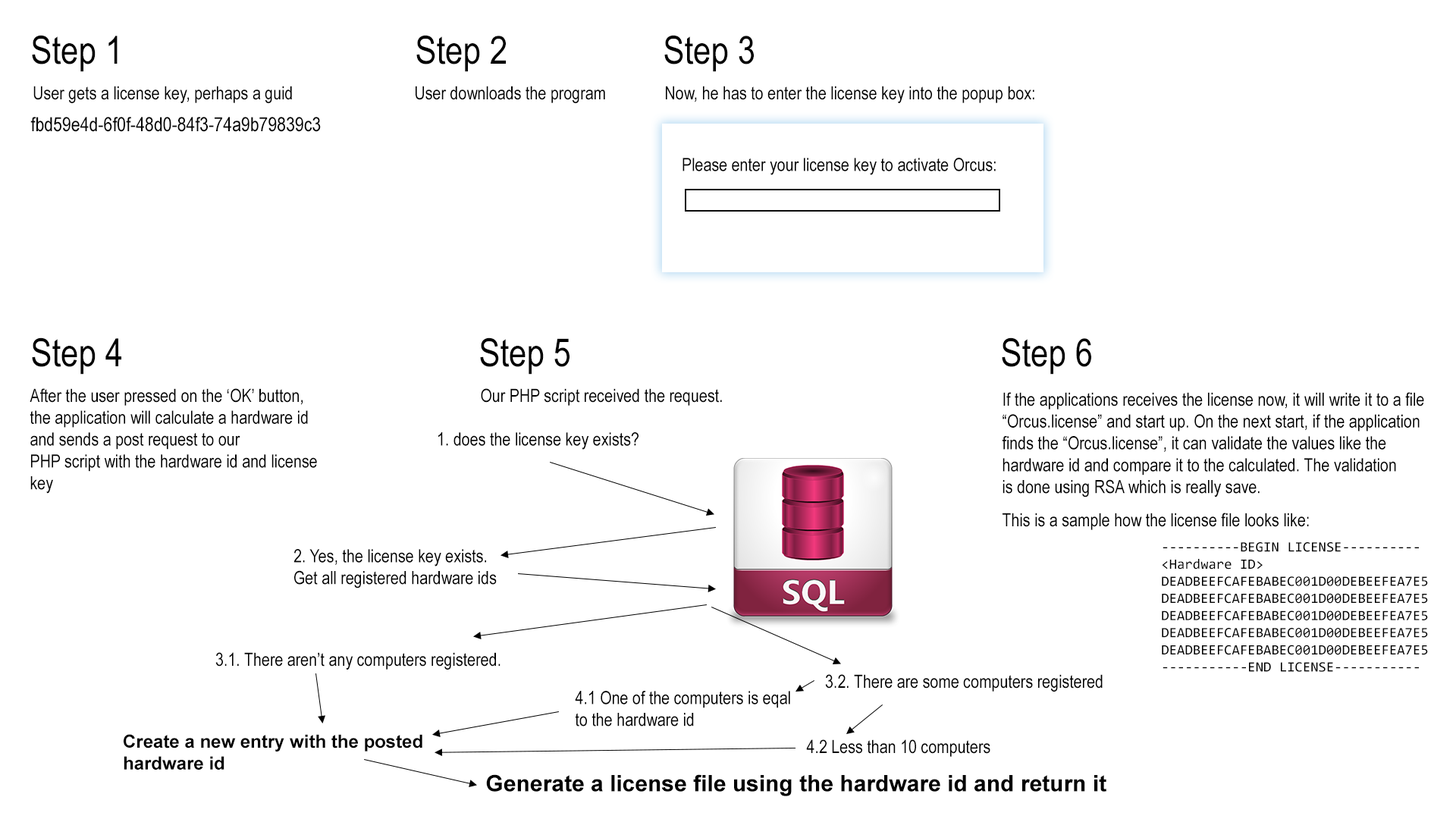
<style>
.page{position:relative;width:1456px;height:819px;background:#ffffff}
.page>*{position:absolute;margin:0}
.t1{font:38.9px "ArialNarrow";color:#000000}
.t2{font:18.2px "ArialNarrow";color:#000000}
.t3{font:19.7px "ArialNarrow";color:#000000}
.t4{font:14.3px "Consolas";color:#000000}
.t5{font:18.2px "Arial-BoldMT";color:#000000}
.t6{font:22.7px "Arial-BoldMT";color:#000000}
</style>
<div class="page">
<p class="t1" style="left:32px;top:35px;width:86px;height:37px">Step 1</p>
<p class="t1" style="left:416px;top:35px;width:90px;height:37px">Step 2</p>
<p class="t1" style="left:664px;top:35px;width:90px;height:37px">Step 3</p>
<p class="t2" style="left:33px;top:86px;width:259px;height:17px">User gets a license key, perhaps a guid</p>
<p class="t2" style="left:416px;top:86px;width:189px;height:17px">User downloads the program</p>
<p class="t2" style="left:666px;top:86px;width:368px;height:17px">Now, he has to enter the license key into the popup box:</p>
<p class="t3" style="left:30px;top:117px;width:291px;height:15px">fbd59e4d-6f0f-48d0-84f3-74a9b79839c3</p>
<p class="t2" style="left:682px;top:158px;width:314px;height:17px">Please enter your license key to activate Orcus:</p>
<p class="t1" style="left:32px;top:337px;width:89px;height:38px">Step 4</p>
<p class="t1" style="left:480px;top:337px;width:90px;height:38px">Step 5</p>
<p class="t1" style="left:1002px;top:337px;width:89px;height:38px">Step 6</p>
<p class="t2" style="left:30px;top:388px;width:287px;height:106px">After the user pressed on the ‘OK’ button,<br>the application will calculate a hardware id<br>and sends a post request to our<br>PHP script with the hardware id and license<br>key</p>
<p class="t2" style="left:481px;top:388px;width:241px;height:18px">Our PHP script received the request.</p>
<p class="t2" style="left:1002px;top:392px;width:422px;height:105px">If the applications receives the license now, it will write it to a file<br>“Orcus.license” and start up. On the next start, if the application<br>finds the “Orcus.license”, it can validate the values like the<br>hardware id and compare it to the calculated. The validation<br>is done using RSA which is really save.</p>
<p class="t2" style="left:438px;top:432px;width:201px;height:18px">1. does the license key exists?</p>
<p class="t2" style="left:1003px;top:513px;width:306px;height:17px">This is a sample how the license file looks like:</p>
<p class="t4" style="left:1162px;top:542px;width:266px;height:130px">----------BEGIN LICENSE----------<br>&lt;Hardware ID&gt;<br>DEADBEEFCAFEBABEC001D00DEBEEFEA7E5<br>DEADBEEFCAFEBABEC001D00DEBEEFEA7E5<br>DEADBEEFCAFEBABEC001D00DEBEEFEA7E5<br>DEADBEEFCAFEBABEC001D00DEBEEFEA7E5<br>DEADBEEFCAFEBABEC001D00DEBEEFEA7E5<br>-----------END LICENSE-----------</p>
<p class="t2" style="left:293px;top:549px;width:204px;height:39px">2. Yes, the license key exists.<br>Get all registered hardware ids</p>
<p class="t2" style="left:215px;top:652px;width:285px;height:18px">3.1. There aren’t any computers registered.</p>
<p class="t2" style="left:825px;top:674px;width:278px;height:18px">3.2. There are some computers registered</p>
<p class="t2" style="left:575px;top:691px;width:215px;height:35px">4.1 One of the computers is eqal<br>to the hardware id</p>
<p class="t5" style="left:124px;top:734px;width:298px;height:36px">Create a new entry with the posted<br>hardware id</p>
<p class="t2" style="left:806px;top:739px;width:184px;height:18px">4.2 Less than 10 computers</p>
<p class="t6" style="left:486px;top:774px;width:620px;height:22px">Generate a license file using the hardware id and return it</p>
</div>
